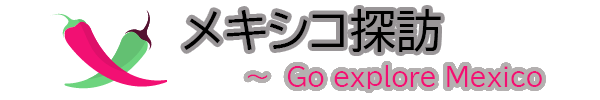
<style>
.page{position:relative;width:600px;height:100px;background:#ffffff}
.page>*{position:absolute;margin:0}
.t1{font:45.8px "BIZ-UDPGothic";color:#000000}
.t2{font:25px "BIZ-UDPGothic";color:#f21073}
</style>
<div class="page">
<p class="t1" style="left:184px;top:9px;width:257px;height:43px">メキシコ探訪</p>
<p class="t2" style="left:247px;top:65px;width:295px;height:24px">～　Go explore Mexico</p>
</div>
